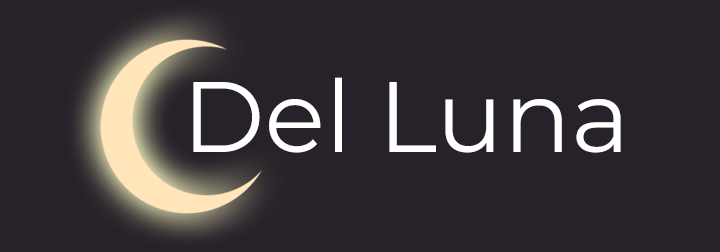
<style>
.page{position:relative;width:720px;height:252px;background:#272129}
.page>*{position:absolute;margin:0}
.t1{font:100px "Montserrat-Regular";color:#ffffff}
</style>
<div class="page">
<p class="t1" style="left:193px;top:77px;width:428px;height:76px">Del Luna</p>
</div>
